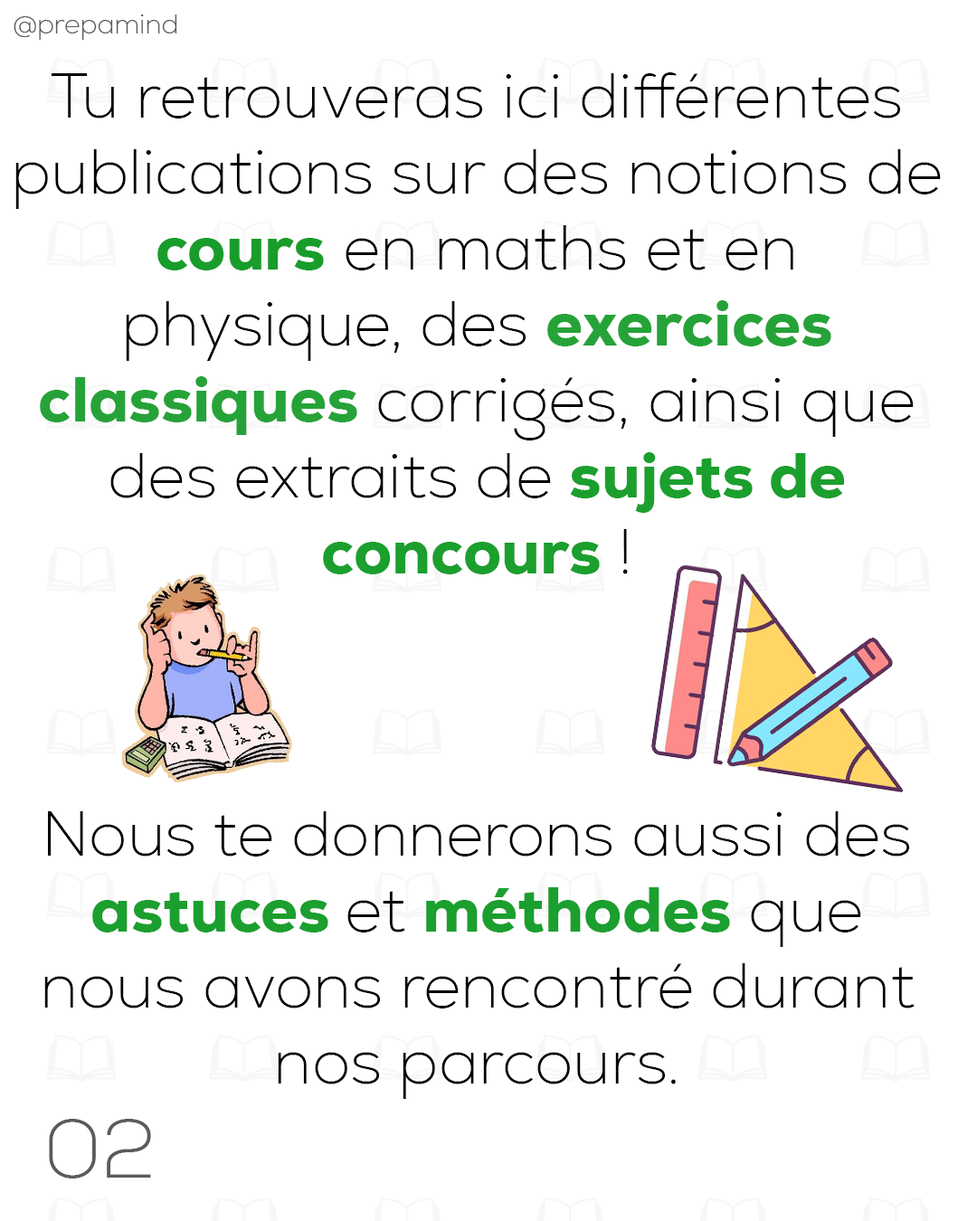
<style>
.page{position:relative;width:977px;height:1221px;background:#ffffff}
.page>*{position:absolute;margin:0}
.t1{font:27.1px "Nexa-ExtraLight";color:#5e5a5a}
.t2{font:63.3px "Nexa-ExtraLight";color:#000000}
.t3{font:63.3px "Nexa-Heavy";color:#189d2b}
.t4{font:63.3px "Nexa-Heavy";color:#26a338}
.t5{font:63.3px "Nexa-Heavy";color:#1b9f2d}
.t6{font:63.3px "Nexa-Heavy";color:#1b9f2e}
.t7{font:81.7px "Nexa-ExtraLight";color:#5e5a5a}
</style>
<div class="page">
<p class="t1" style="left:14px;top:14px;width:163px;height:26px">@prepamind</p>
<p class="t2" style="left:15px;top:72px;width:926px;height:1027px;text-align:center">Tu retrouveras ici différentes publications sur des notions de <span class="t3">cours</span> en maths et en physique, des <span class="t4">exercices classiques</span> corrigés, ainsi que des extraits de <span class="t5">sujets de concours</span> !<br><br><br><br><br><br>Nous te donnerons aussi des <span class="t6">astuces </span>et <span class="t6">méthodes</span> que nous avons rencontré durant nos parcours.</p>
<p class="t7" style="left:49px;top:1119px;width:102px;height:59px">02</p>
</div>
